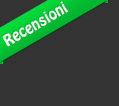
<style>
.page{position:relative;width:119px;height:106px;background:#333333}
.page>*{position:absolute;margin:0}
.t1{font:14px "HoboStd";letter-spacing:0.02em;color:#ffffff}
</style>
<div class="page">
<p class="t1" style="left:2px;top:1px;width:66px;height:46px;rotate:-30deg">Recensioni</p>
</div>
